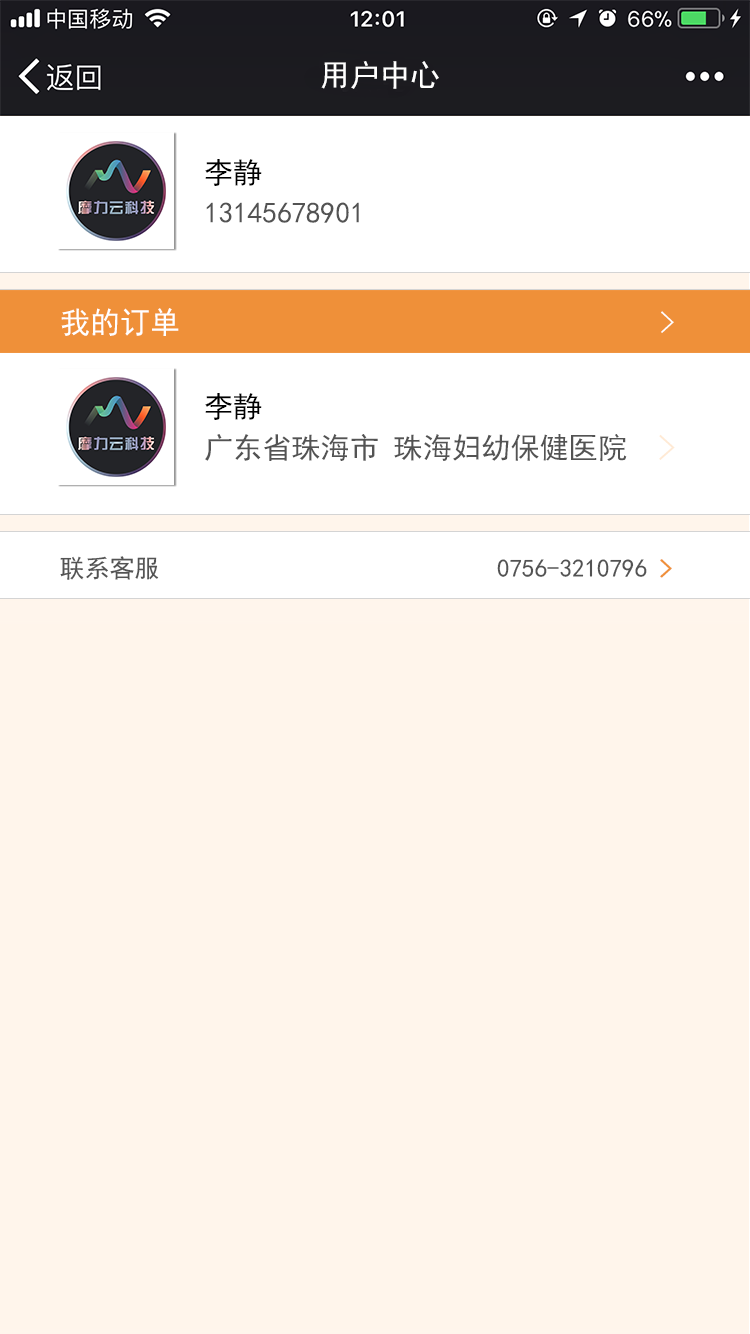
<style>
.page{position:relative;width:750px;height:1334px;background:#fff5eb}
.page>*{position:absolute;margin:0}
.t1{font:30.5px "SimHei";color:#ffffff}
.t2{font:29.1px/40.5px "SimHei";color:#535353}
.t3{font:29.1px/40.5px "SimHei";color:#000000}
.t4{font:29.1px/87.4px "SimHei";color:#535353}
.t5{font:35.4px "SimHei";color:#ffead5}
.t6{font:25px "SimHei";color:#535353}
.t7{font:25px "SimHei";color:#ef9039;font-weight:bold}
</style>
<div class="page">
<p class="t1" style="left:321px;top:61px;width:118px;height:28px">用户中心</p>
<p class="t2" style="left:205px;top:159px;width:154px;height:64px"><span class="t3">李静<br></span>13145678901</p>
<p class="t1" style="left:61px;top:308px;width:613px;height:28px">我的订单                                &gt;</p>
<p class="t4" style="left:205px;top:393px;width:422px;height:68px"><span class="t3">李静<br></span>广东省珠海市 珠海妇幼保健医院</p>
<p class="t5" style="left:659px;top:434px;width:16px;height:26px">&gt;</p>
<p class="t6" style="left:60px;top:556px;width:612px;height:24px">联系客服                           0756-3210796 <span class="t7">&gt;</span></p>
</div>
